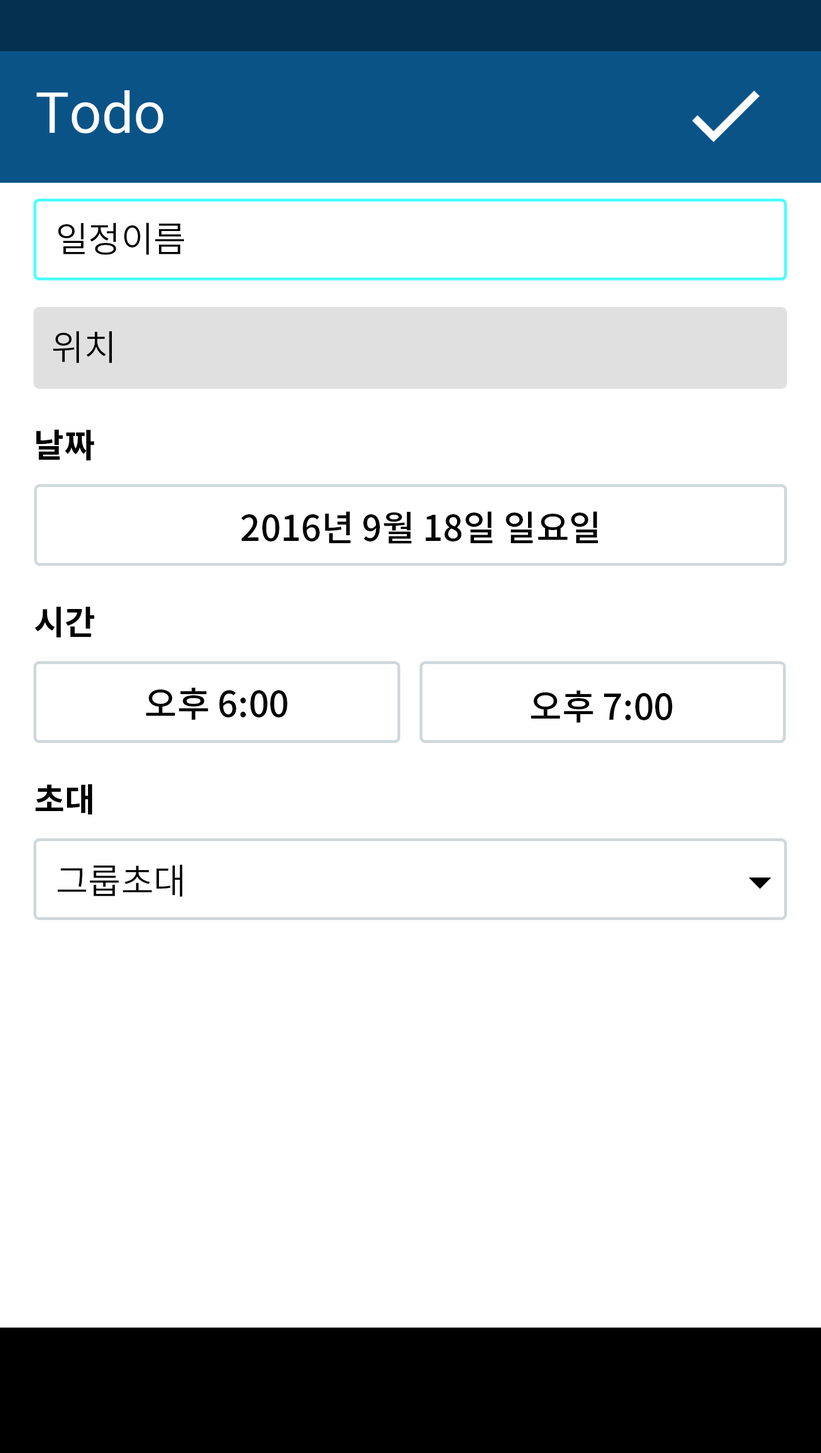
<style>
.page{position:relative;width:821px;height:1453px;background:#ffffff}
.page>*{position:absolute;margin:0}
.t1{font:56.8px "Roboto-Regular";color:#ffffff}
.t2{font:35.5px "NotoSansCJKkr-DemiLight";color:#000000}
.t3{font:33.1px "NotoSansCJKkr-Bold";color:#000000}
.t4{font:35.5px "NotoSansCJKkr-Medium";color:#000000}
</style>
<div class="page">
<p class="t1" style="left:36px;top:90px;width:127px;height:43px">Todo</p>
<p class="t2" style="left:58px;top:222px;width:126px;height:33px">일정이름</p>
<p class="t2" style="left:53px;top:331px;width:59px;height:32px">위치</p>
<p class="t3" style="left:36px;top:430px;width:58px;height:31px">날짜</p>
<p class="t4" style="left:241px;top:511px;width:357px;height:33px">2016년 9월 18일 일요일</p>
<p class="t3" style="left:35px;top:607px;width:59px;height:30px">시간</p>
<p class="t4" style="left:146px;top:687px;width:141px;height:33px">오후 6:00</p>
<p class="t4" style="left:531px;top:690px;width:141px;height:33px">오후 7:00</p>
<p class="t3" style="left:35px;top:784px;width:58px;height:30px">초대</p>
<p class="t2" style="left:57px;top:864px;width:125px;height:33px">그룹초대</p>
</div>
